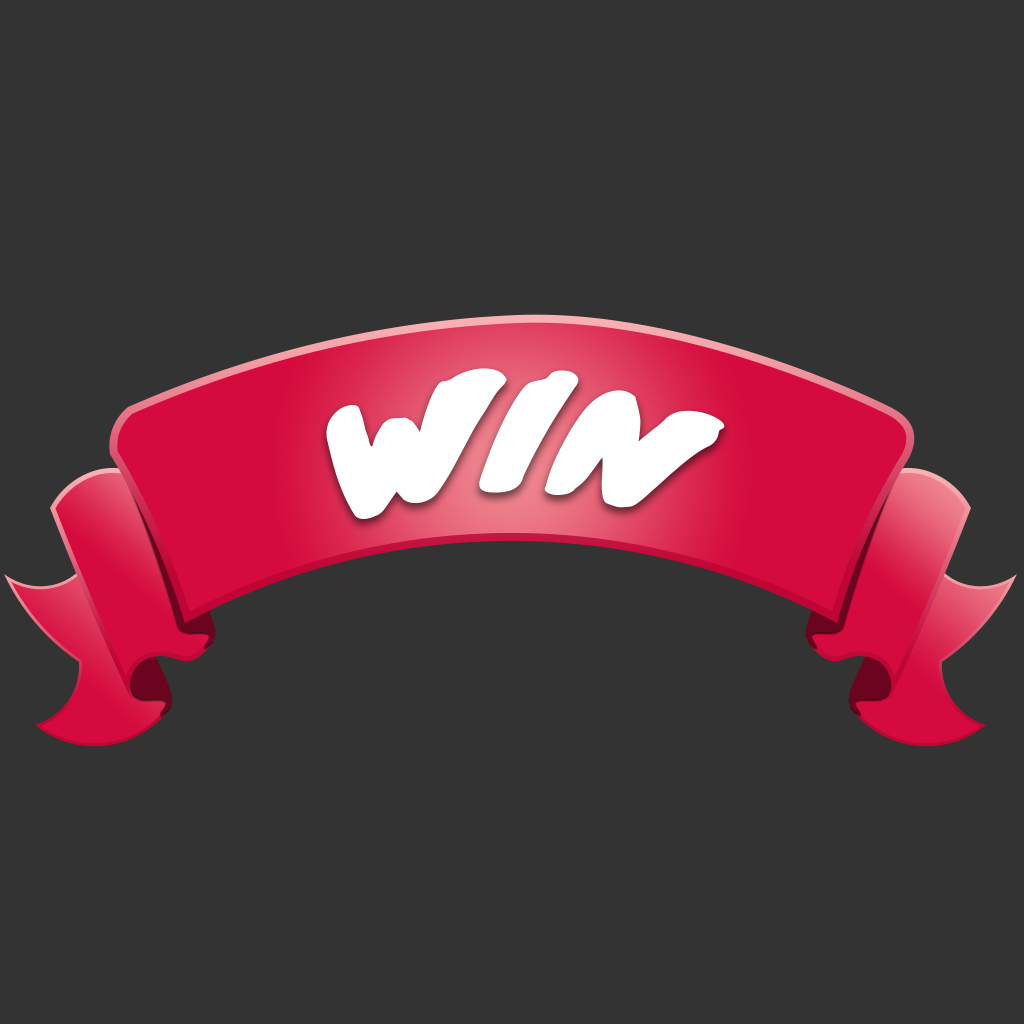
<style>
.page{position:relative;width:1024px;height:1024px;background:#333333}
.page>*{position:absolute;margin:0}
.t1{font:148.5px "Knewave-Regular";color:#ffffff}
</style>
<div class="page">
<p class="t1" style="left:326px;top:368px;width:399px;height:151px">WIN</p>
</div>
